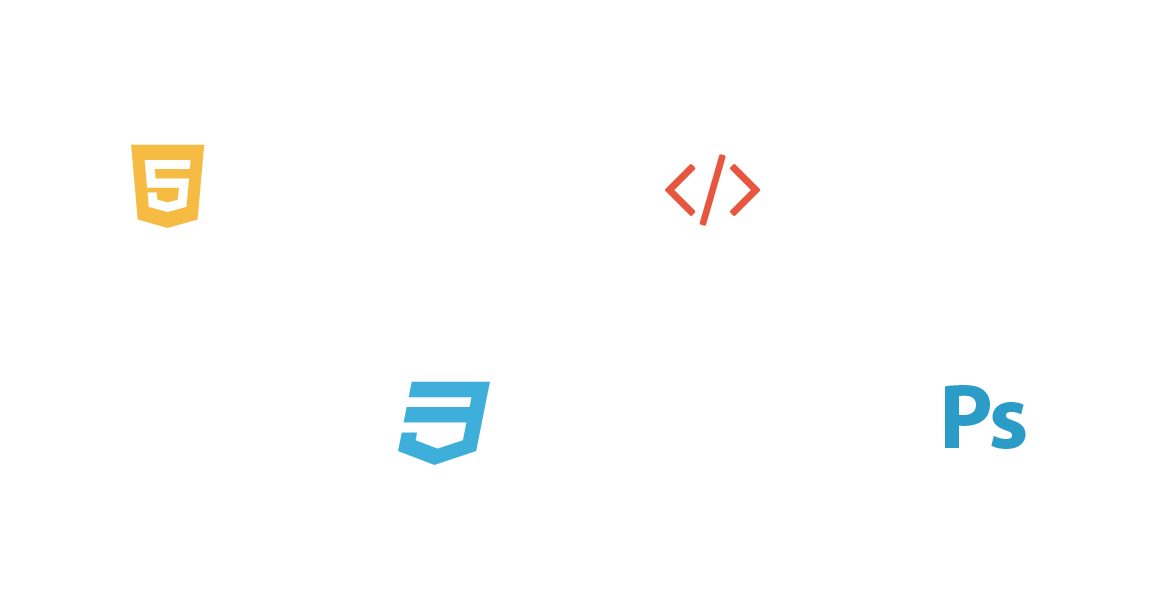
<style>
.page{position:relative;width:1150px;height:600px;background:#ffffff}
.page>*{position:absolute;margin:0}
.t1{font:93.3px "MyriadPro-Bold";letter-spacing:-0.05em;color:#2b9cc8}
</style>
<div class="page">
<p class="t1" style="left:945px;top:385px;width:81px;height:64px">Ps</p>
</div>
